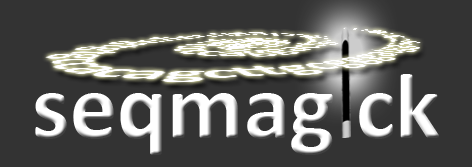
<style>
.page{position:relative;width:472px;height:167px;background:#333333}
.page>*{position:absolute;margin:0}
.t1{font:93.8px "Calibri-Bold";color:#ffffff}
</style>
<div class="page">
<p class="t1" style="left:35px;top:74px;width:404px;height:81px">seqmag ck</p>
</div>
